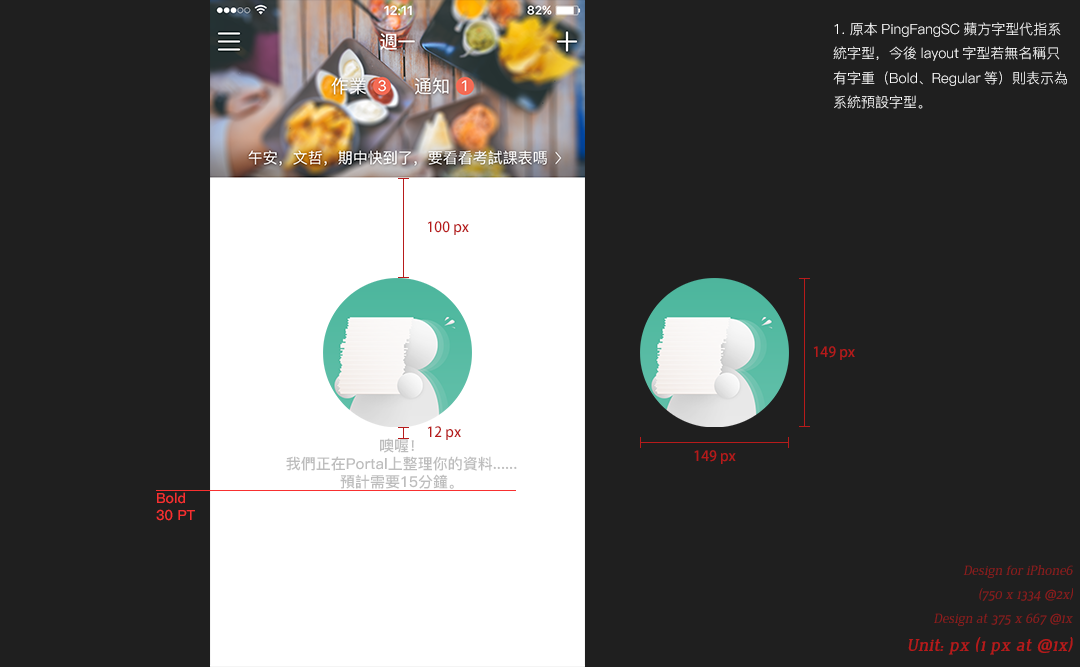
<style>
.page{position:relative;width:1080px;height:667px;background:#1f1f1f}
.page>*{position:absolute;margin:0}
.t1{font:14px "PingFang-SC-Regular";color:#ffffff}
.t2{font:14px "AdobeFanHeitiStd-Bold";color:#b71a1a}
.t3{font:15px "PingFang-SC-Bold";color:#bdbdbd}
.t4{font:14px "PingFang-SC-Bold";color:#f83030}
.t5{font:14px "Jura-Italic";color:#8e1c1c}
.t6{font:18px "Jura-BoldItalic";color:#b71a1a}
</style>
<div class="page">
<p class="t1" style="left:833px;top:22px;width:234px;height:87px">1. 原本PingFangSC蘋方字型代指系統字型，今後layout字型若無名稱只有字重（Bold、Regular等）則表示為系統預設字型。</p>
<p class="t2" style="left:427px;top:221px;width:42px;height:14px">100 px</p>
<p class="t2" style="left:813px;top:346px;width:42px;height:14px">149 px</p>
<p class="t3" style="left:286px;top:438px;width:231px;height:51px;text-align:center">噢喔！<br>我們正在Portal上整理你的資料......<br>預計需要15分鐘。</p>
<p class="t2" style="left:427px;top:426px;width:34px;height:14px">12 px</p>
<p class="t2" style="left:694px;top:450px;width:42px;height:14px">149 px</p>
<p class="t4" style="left:156px;top:492px;width:39px;height:29px">Bold<br>30 PT</p>
<p class="t5" style="left:963px;top:565px;width:110px;height:36px;text-align:right">Design for iPhone6<br>(750 x 1334 @2x)</p>
<p class="t5" style="left:934px;top:613px;width:139px;height:13px">Design at 375 x 667 @1x</p>
<p class="t6" style="left:908px;top:637px;width:165px;height:18px">Unit: px (1 px at @1x)</p>
</div>
